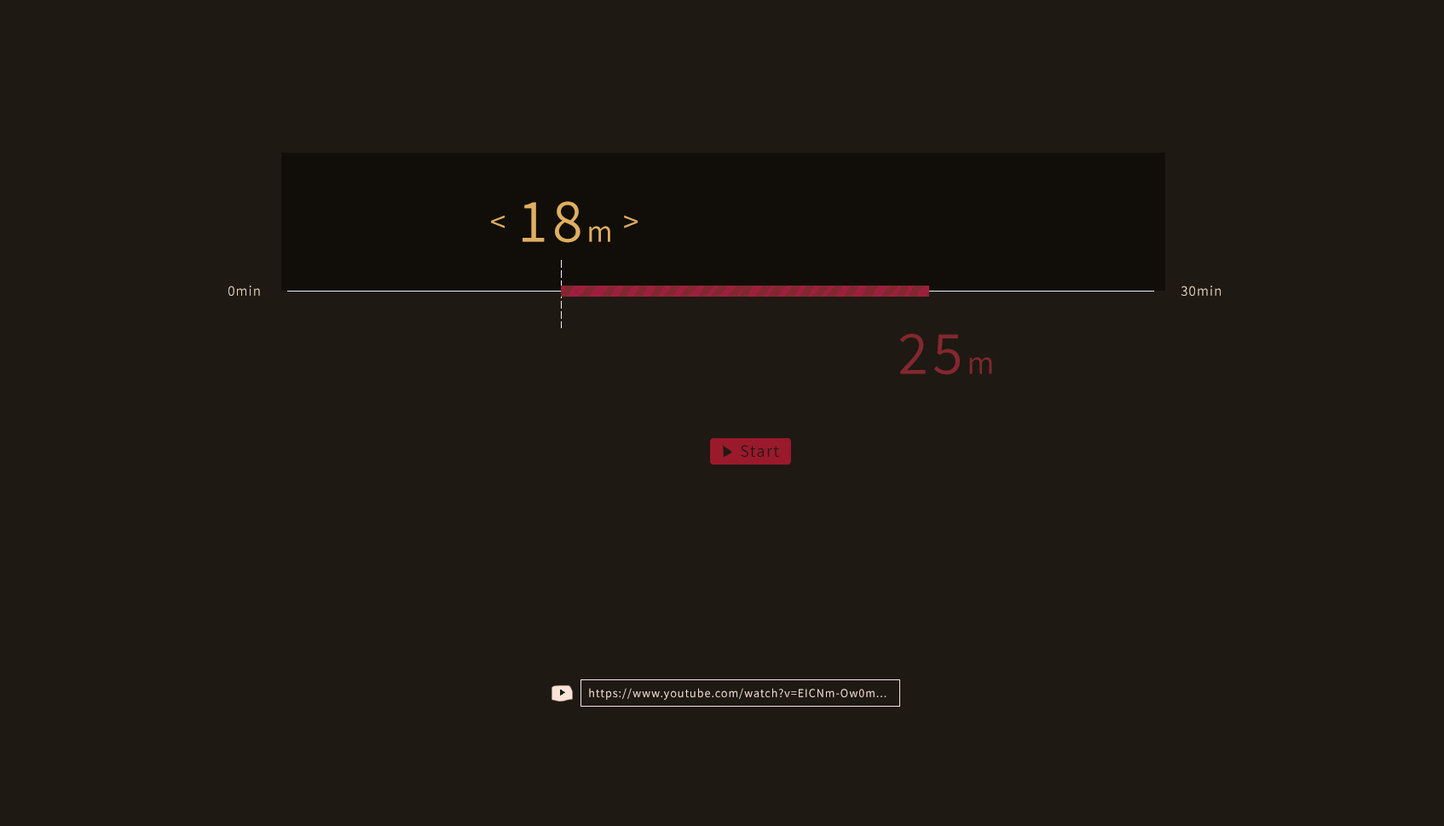
<style>
.page{position:relative;width:1444px;height:826px;background:#1e1913}
.page>*{position:absolute;margin:0}
.t1{font:55.1px "SourceHanSans-Normal";letter-spacing:0.08em;color:#dfae61}
.t2{font:27.8px "SourceHanSans-Normal";letter-spacing:0.08em;color:#dfae61}
.t3{font:28.4px "SourceHanSans-Normal";letter-spacing:0.08em;color:#dfae61}
.t4{font:12.8px "SourceHanSans-Normal";letter-spacing:0.08em;color:#e7d5c1}
.t5{font:55.1px "SourceHanSans-Normal";letter-spacing:0.08em;color:#822730}
.t6{font:29.5px "SourceHanSans-Normal";letter-spacing:0.08em;color:#822730}
.t7{font:15.3px "SourceHanSans-Normal";letter-spacing:0.08em;color:#1e1913}
.t8{font:10.8px "SourceHanSans-Normal";letter-spacing:0.08em;color:#fbe3d7}
</style>
<div class="page">
<p class="t1" style="left:522px;top:201px;width:88px;height:42px">18<span class="t2">m</span></p>
<p class="t3" style="left:491px;top:215px;width:14px;height:13px">&lt;</p>
<p class="t3" style="left:624px;top:215px;width:14px;height:13px">&gt;</p>
<p class="t4" style="left:228px;top:286px;width:32px;height:10px">0min</p>
<p class="t4" style="left:1180px;top:286px;width:41px;height:10px">30min</p>
<p class="t5" style="left:900px;top:333px;width:92px;height:42px">25<span class="t6">m</span></p>
<p class="t7" style="left:741px;top:445px;width:38px;height:12px">Start</p>
<p class="t8" style="left:589px;top:688px;width:297px;height:12px">https://www.youtube.com/watch?v=EICNm-Ow0m...</p>
</div>
